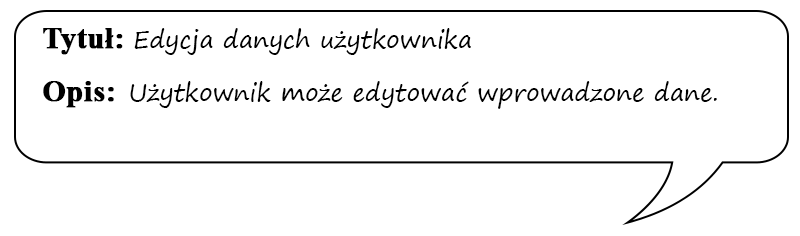
<style>
.page{position:relative;width:800px;height:236px;background:#ffffff}
.page>*{position:absolute;margin:0}
.t1{font:24px "SegoePrint";color:#000000}
.t2{font:30px "TimesNewRomanPS-BoldMT";color:#000000;font-weight:bold}
</style>
<div class="page">
<p class="t1" style="left:43px;top:28px;width:674px;height:81px"><span class="t2">Tytuł: </span>Edycja danych użytkownika<br><br><span class="t2">Opis:  </span>Użytkownik może edytować wprowadzone dane.</p>
</div>
